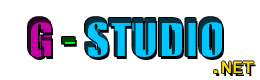
<style>
.page{position:relative;width:260px;height:80px;background:#ffffff}
.page>*{position:absolute;margin:0}
.t1{font:48px "Impact"}
.t2{font:18px "LucidaConsole";color:#ffde00}
</style>
<div class="page">
<p class="t1" style="left:28px;top:17px;width:194px;height:40px">G - STUDIO</p>
<p class="t2" style="left:214px;top:61px;width:40px;height:12px">.NET</p>
</div>
